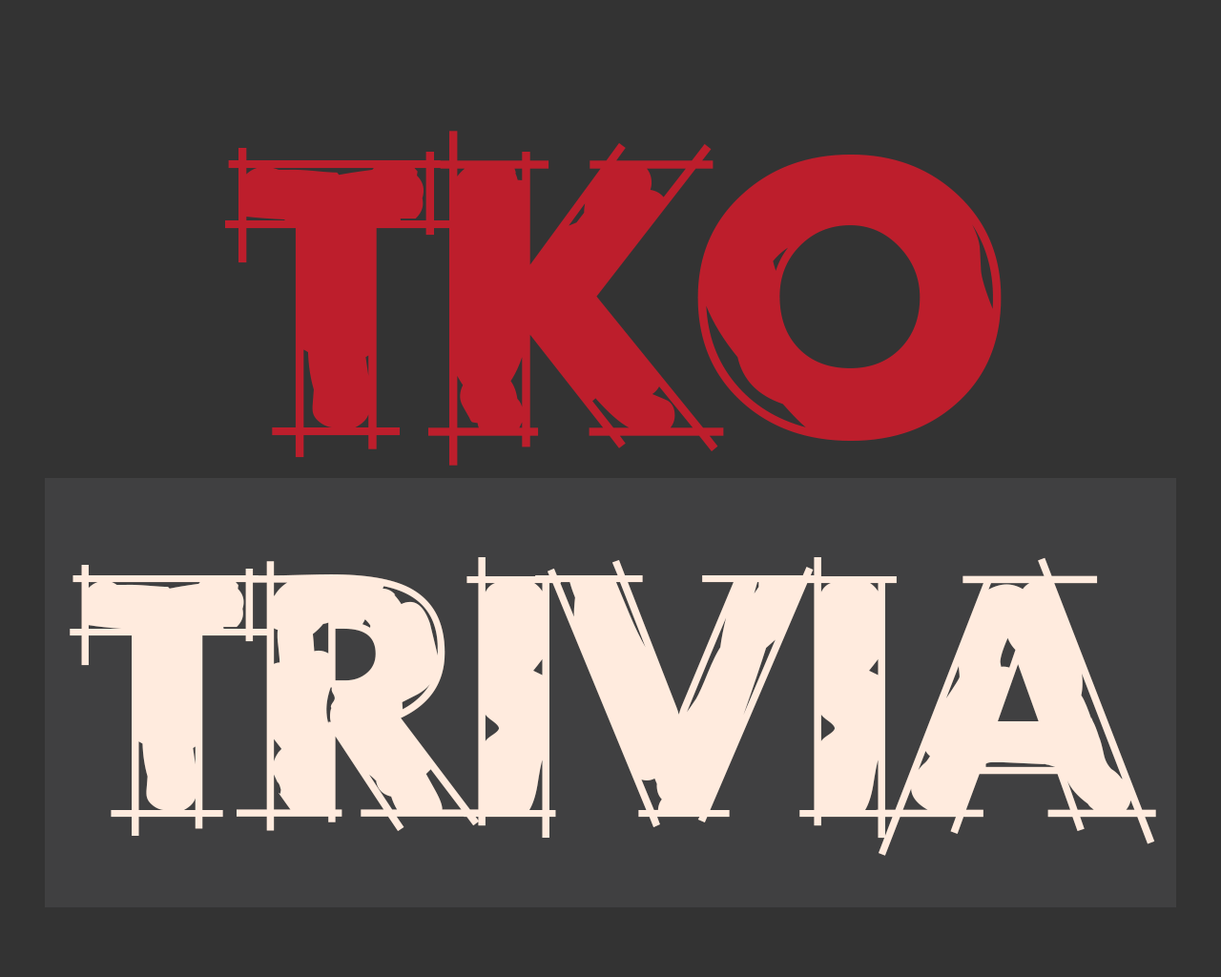
<style>
.page{position:relative;width:1221px;height:977px;background:#333333}
.page>*{position:absolute;margin:0}
.t1{font:381.5px "RoughDraft";color:#bd1e2c}
.t2{font:333.8px "RoughDraft";color:#ffebde}
</style>
<div class="page">
<p class="t1" style="left:225px;top:131px;width:777px;height:334px">TKO</p>
<p class="t2" style="left:70px;top:557px;width:1086px;height:299px">TRIVIA</p>
</div>
